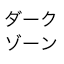
<style>
.page{position:relative;width:64px;height:64px;background:#ffffff}
.page>*{position:absolute;margin:0}
.t1{font:18px/24px "HiraKakuPro-W3";color:#000000}
</style>
<div class="page">
<p class="t1" style="left:5px;top:10px;width:52px;height:41px">ダーク<br>ゾーン</p>
</div>
